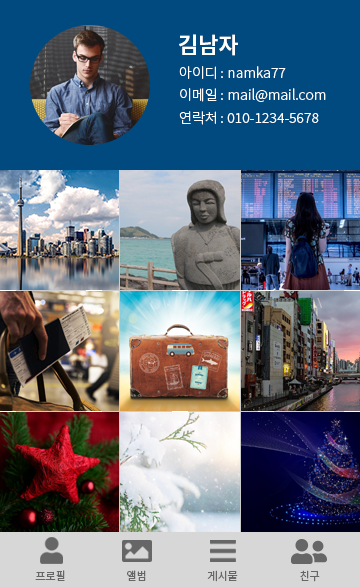
<style>
.page{position:relative;width:360px;height:587px;background:#004a80}
.page>*{position:absolute;margin:0}
.t1{font:22px "NotoSansKR-Bold";color:#ffffff}
.t2{font:14px "NotoSansKR-Light";color:#ffffff}
.t3{font:11px "NotoSansKR-Regular";color:#666666}
</style>
<div class="page">
<p class="t1" style="left:179px;top:34px;width:59px;height:22px">김남자</p>
<p class="t2" style="left:179px;top:66px;width:107px;height:14px">아이디 : namka77</p>
<p class="t2" style="left:180px;top:88px;width:146px;height:14px">이메일 : mail@mail.com</p>
<p class="t2" style="left:179px;top:111px;width:140px;height:14px">연락처 : 010-1234-5678</p>
<p class="t3" style="left:35px;top:570px;width:30px;height:11px">프로필</p>
<p class="t3" style="left:127px;top:570px;width:19px;height:11px">앨범</p>
<p class="t3" style="left:207px;top:570px;width:31px;height:12px">게시물</p>
<p class="t3" style="left:300px;top:570px;width:20px;height:12px">친구</p>
</div>
